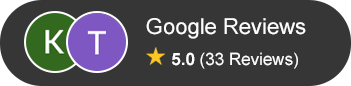
<style>
.page{position:relative;width:351px;height:86px;background:#363636}
.page>*{position:absolute;margin:0}
.t1{font:22px "ArialMT";color:#ffffff}
.t2{font:17px "ArialMT";color:#ffffff}
.t3{font:17px "Arial-BoldMT";color:#ffffff}
</style>
<div class="page">
<p class="t1" style="left:146px;top:18px;width:160px;height:21px">Google Reviews</p>
<p class="t2" style="left:172px;top:52px;width:126px;height:17px"><span class="t3">5.0 </span>(33 Reviews)</p>
</div>
